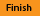
<style>
.page{position:relative;width:40px;height:16px;background:#f8941d}
.page>*{position:absolute;margin:0}
.t1{font:9.6px "MyriadPro-Regular";color:#090909;scale:1.11 1}
</style>
<div class="page">
<p class="t1" style="left:6px;top:4px;width:26px;height:7px">Finish</p>
</div>
